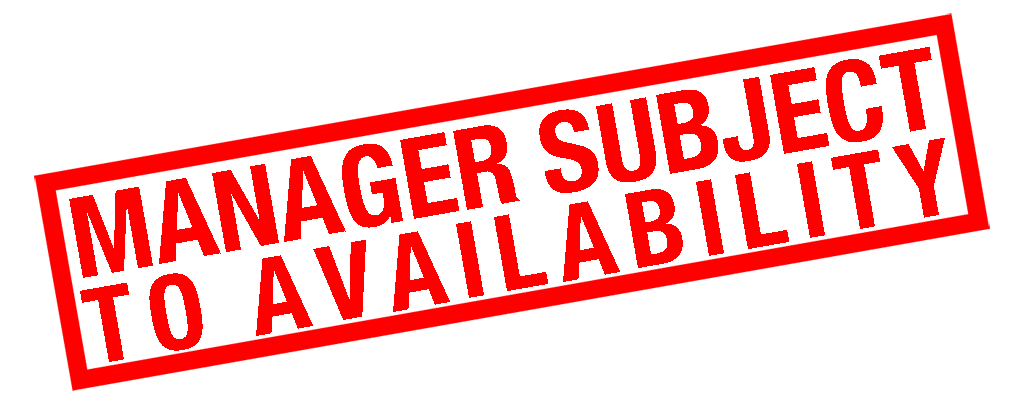
<style>
.page{position:relative;width:1024px;height:406px;background:#ffffff}
.page>*{position:absolute;margin:0}
.t1{font:112.8px/87.3px "HelveticaNeue-CondensedBold";color:#ff0000}
.t2{font:104.8px/87.3px "HelveticaNeue-CondensedBold";letter-spacing:0.125em;color:#ff0000}
</style>
<div class="page">
<p class="t1" style="left:69px;top:47px;width:876px;height:315px;text-align:justify;rotate:-10deg">MANAGER SUBJECT<br><span class="t2">TO AVAILABILITY</span></p>
</div>
